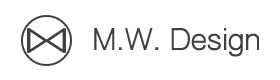
<style>
.page{position:relative;width:280px;height:80px;background:#ffffff}
.page>*{position:absolute;margin:0}
.t1{font:28px "ARGothic1-Medium";color:#404040}
</style>
<div class="page">
<p class="t1" style="left:94px;top:28px;width:165px;height:29px">M.W. Design</p>
</div>
